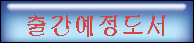
<style>
.page{position:relative;width:194px;height:43px}
.page>*{position:absolute;margin:0}
.t1{font:24px "TSTNamr";color:#d44545}
</style>
<div class="page">
<p class="t1" style="left:27px;top:15px;width:138px;height:22px">출간예정도서</p>
</div>
